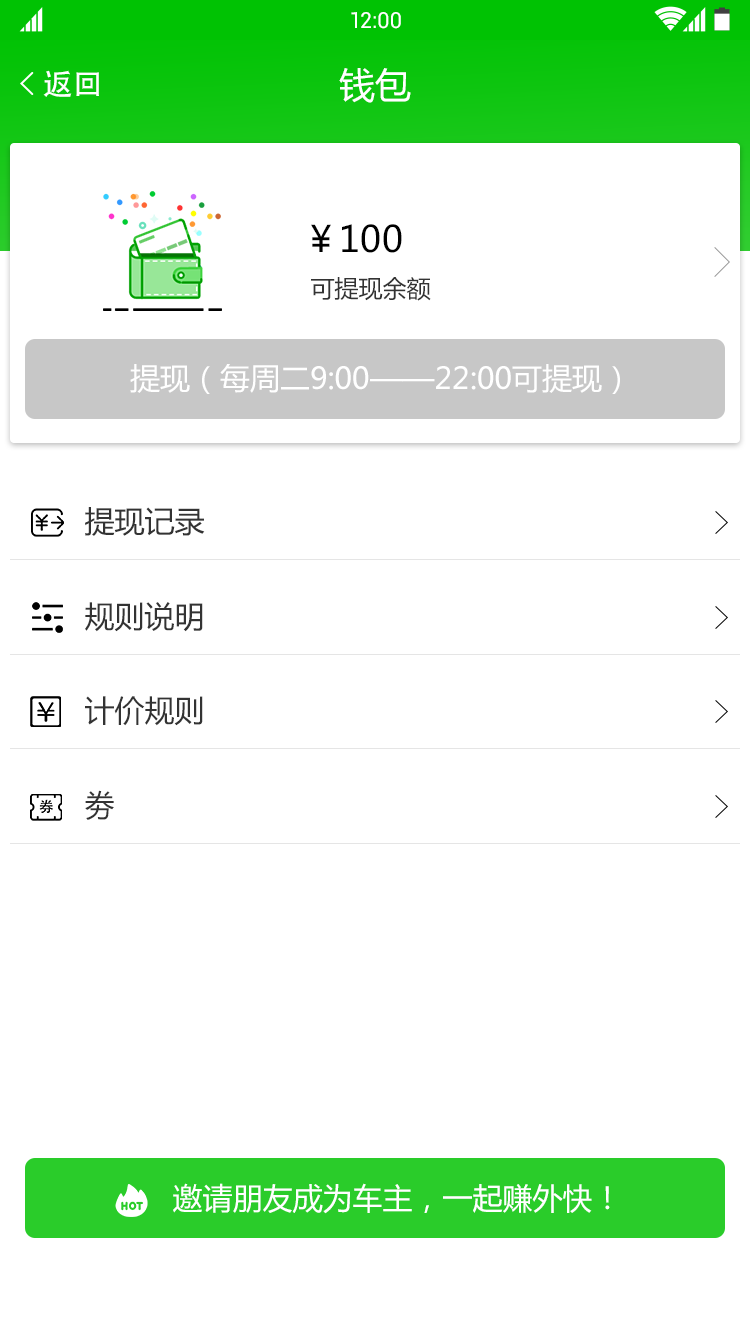
<style>
.page{position:relative;width:750px;height:1336px;background:#ffffff}
.page>*{position:absolute;margin:0}
.t1{font:22px "Roboto-Regular";color:#ffffff}
.t2{font:30px "AdobeHeitiStd-Regular";color:#ffffff}
.t3{font:36px "MicrosoftYaHei";color:#ffffff}
.t4{font:36px "MicrosoftYaHei";color:#000000}
.t5{font:24px "MicrosoftYaHei";color:#333333}
.t6{font:30px "MicrosoftYaHei";color:#ffffff}
.t7{font:30px "MicrosoftYaHei";color:#333333}
</style>
<div class="page">
<p class="t1" style="left:351px;top:12px;width:50px;height:17px">12:00</p>
<p class="t2" style="left:43px;top:70px;width:56px;height:27px">返回</p>
<p class="t3" style="left:339px;top:68px;width:72px;height:35px">钱包</p>
<p class="t4" style="left:311px;top:224px;width:91px;height:29px">￥100</p>
<p class="t5" style="left:311px;top:277px;width:120px;height:24px">可提现余额</p>
<p class="t6" style="left:130px;top:364px;width:490px;height:30px">提现（每周二9:00——22:00可提现）</p>
<p class="t7" style="left:85px;top:507px;width:120px;height:29px">提现记录</p>
<p class="t7" style="left:85px;top:602px;width:118px;height:30px">规则说明</p>
<p class="t7" style="left:85px;top:696px;width:118px;height:30px">计价规则</p>
<p class="t7" style="left:85px;top:790px;width:29px;height:30px">劵</p>
<p class="t6" style="left:173px;top:1183px;width:437px;height:31px">邀请朋友成为车主，一起赚外快！</p>
</div>
